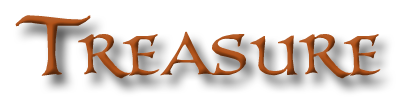
<style>
.page{position:relative;width:400px;height:100px;background:#ffffff}
.page>*{position:absolute;margin:0}
.t1{font:84.3px "PR-UncialAltCaps2";color:#af5119;font-variant:small-caps;scale:0.8 1}
</style>
<div class="page">
<p class="t1" style="left:15px;top:15px;width:76px;height:61px">T</p>
<p class="t1" style="left:78px;top:31px;width:303px;height:48px">reasure</p>
</div>
